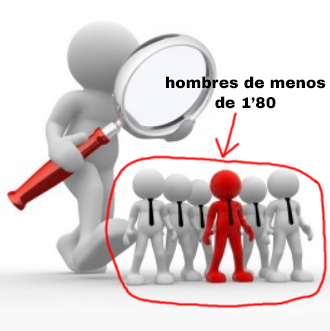
<style>
.page{position:relative;width:330px;height:331px}
.page>*{position:absolute;margin:0}
.t1{font:15.5px "ArchivoBlack-Regular";color:#000000}
</style>
<div class="page">
<p class="t1" style="left:166px;top:76px;width:160px;height:33px;text-align:center">hombres de menos<br>de 1’80</p>
</div>
